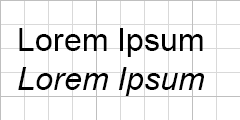
<style>
.page{position:relative;width:240px;height:120px;background:#ffffff}
.page>*{position:absolute;margin:0}
.t1{font:32px "ArialMT";color:#000000}
.t2{font:32px "Arial-ItalicMT";color:#000000}
</style>
<div class="page">
<p class="t1" style="left:18px;top:28px;width:186px;height:68px">Lorem Ipsum<br><span class="t2">Lorem Ipsum</span></p>
</div>
